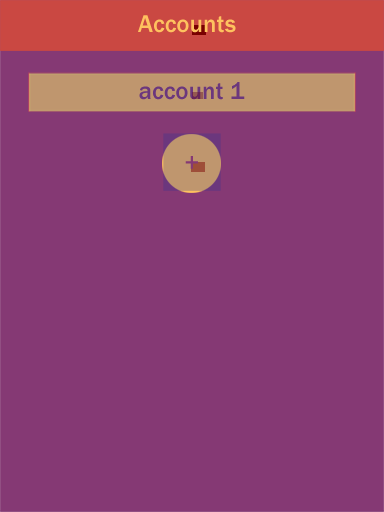
<style>
.page{position:relative;width:384px;height:512px;background:#853974}
.page>*{position:absolute;margin:0}
.t1{font:25px "FranklinGothic-Medium";color:#fec25f}
.t2{font:25px "FranklinGothic-Medium";color:#6b377d}
.t3{font:25px "FranklinGothic-Medium";color:#853974}
</style>
<div class="page">
<p class="t1" style="left:138px;top:15px;width:98px;height:18px">Accounts</p>
<p class="t2" style="left:139px;top:82px;width:106px;height:18px">account 1</p>
<p class="t3" style="left:185px;top:156px;width:13px;height:13px">+</p>
</div>
